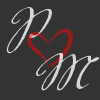
<style>
.page{position:relative;width:100px;height:100px;background:#333333}
.page>*{position:absolute;margin:0}
.t1{font:66.3px "VolutaScriptPro-Regular";color:#d7d6d6}
</style>
<div class="page">
<p class="t1" style="left:6px;top:7px;width:46px;height:47px">P</p>
<p class="t1" style="left:36px;top:53px;width:63px;height:38px">M</p>
</div>
